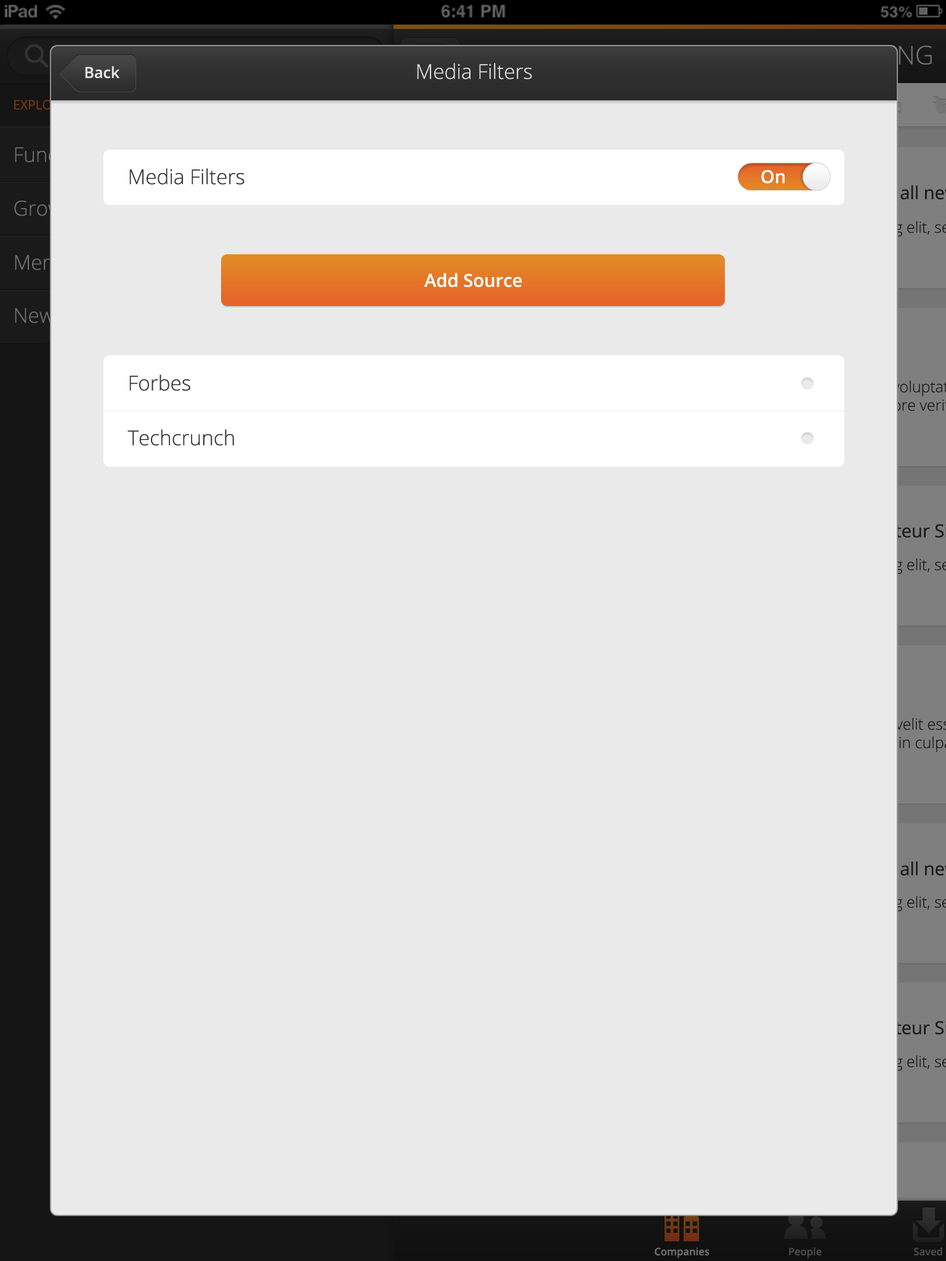
<style>
.page{position:relative;width:946px;height:1261px;background:#eaeaea}
.page>*{position:absolute;margin:0}
.t1{font:15.4px "OpenSans-Semibold";color:#e5e5e5}
.t2{font:20.5px "OpenSans-Light";color:#e5e5e5}
.t3{font:20.5px "OpenSans-Light";color:#343434}
.t4{font:18px "OpenSans-Semibold";color:#ffffff}
</style>
<div class="page">
<p class="t1" style="left:85px;top:66px;width:35px;height:12px">Back</p>
<p class="t2" style="left:417px;top:63px;width:115px;height:16px">Media Filters</p>
<p class="t3" style="left:129px;top:168px;width:115px;height:17px">Media Filters</p>
<p class="t4" style="left:761px;top:170px;width:23px;height:13px">On</p>
<p class="t4" style="left:424px;top:273px;width:98px;height:15px">Add Source</p>
<p class="t3" style="left:129px;top:374px;width:61px;height:17px">Forbes</p>
<p class="t3" style="left:127px;top:429px;width:107px;height:17px">Techcrunch</p>
</div>
